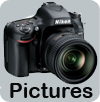
<style>
.page{position:relative;width:100px;height:102px;background:#bdc4c8}
.page>*{position:absolute;margin:0}
.t1{font:21px "ArialRoundedMTBold";color:#090909}
</style>
<div class="page">
<p class="t1" style="left:10px;top:83px;width:83px;height:15px">Pictures</p>
</div>
